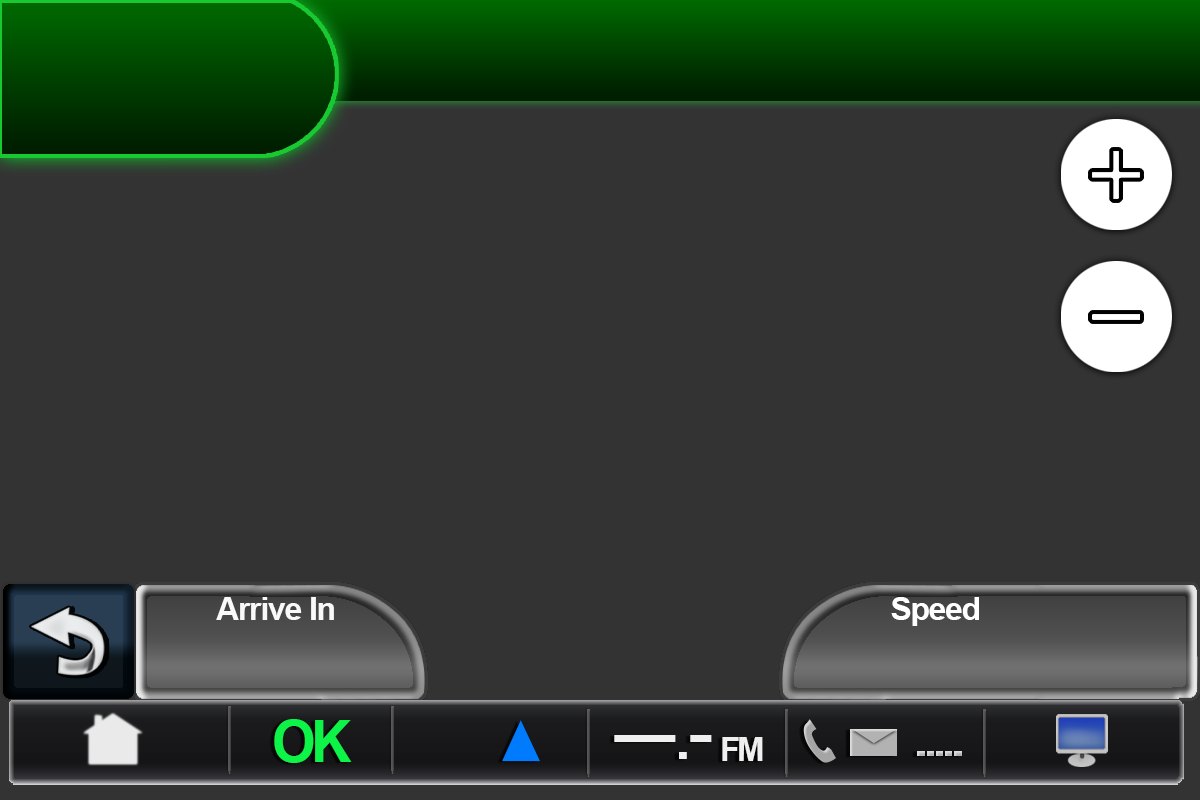
<style>
.page{position:relative;width:1200px;height:800px;background:#333333}
.page>*{position:absolute;margin:0}
.t1{font:31.7px "Arial-BoldMT";letter-spacing:-0.035em;color:#f9f9f9}
.t2{font:31.7px "Arial-BoldMT";letter-spacing:-0.035em;color:#ffffff}
.t3{font:59.5px "Arial-BoldMT";letter-spacing:-0.075em;color:#0df348;scale:0.94 1}
.t4{font:77.1px "ArialMT";letter-spacing:-0.075em;color:#efefef}
.t5{font:33px "Arial-BoldMT";letter-spacing:-0.075em;color:#efefef}
</style>
<div class="page">
<p class="t1" style="left:216px;top:597px;width:118px;height:23px">Arrive In</p>
<p class="t1" style="left:216px;top:597px;width:118px;height:23px">Arrive In</p>
<p class="t2" style="left:891px;top:597px;width:88px;height:29px">Speed</p>
<p class="t2" style="left:891px;top:597px;width:88px;height:29px">Speed</p>
<p class="t3" style="left:274px;top:719px;width:78px;height:44px">OK</p>
<p class="t4" style="left:614px;top:735px;width:98px;height:24px">---.-</p>
<p class="t5" style="left:722px;top:737px;width:41px;height:24px">FM</p>
</div>
